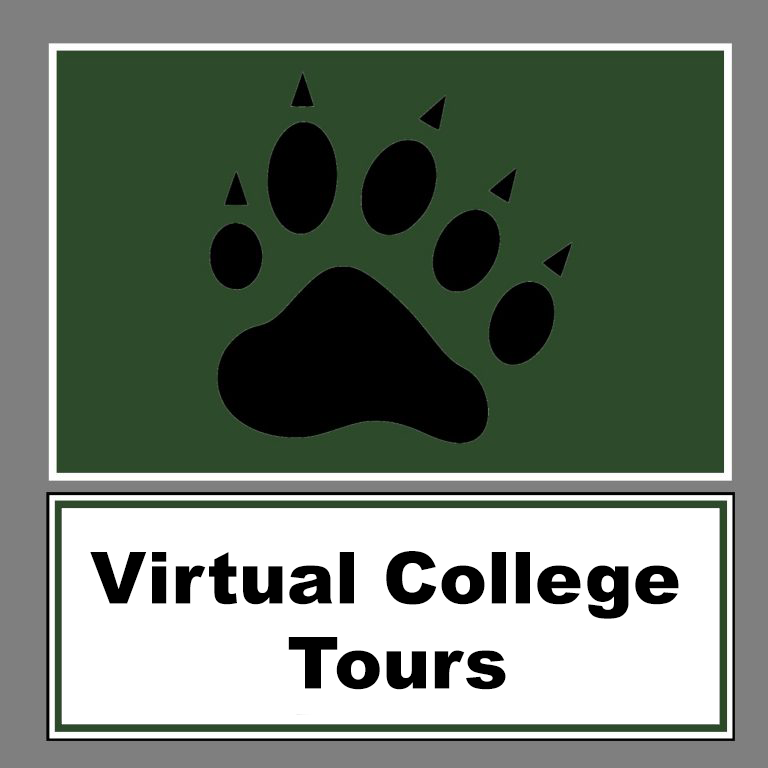
<style>
.page{position:relative;width:768px;height:768px;background:#2d4a2b}
.page>*{position:absolute;margin:0}
.t1{font:72px/85px "Arial-Black";color:#000000}
</style>
<div class="page">
<p class="t1" style="left:90px;top:551px;width:589px;height:139px;text-align:center">Virtual College <br>Tours</p>
</div>
